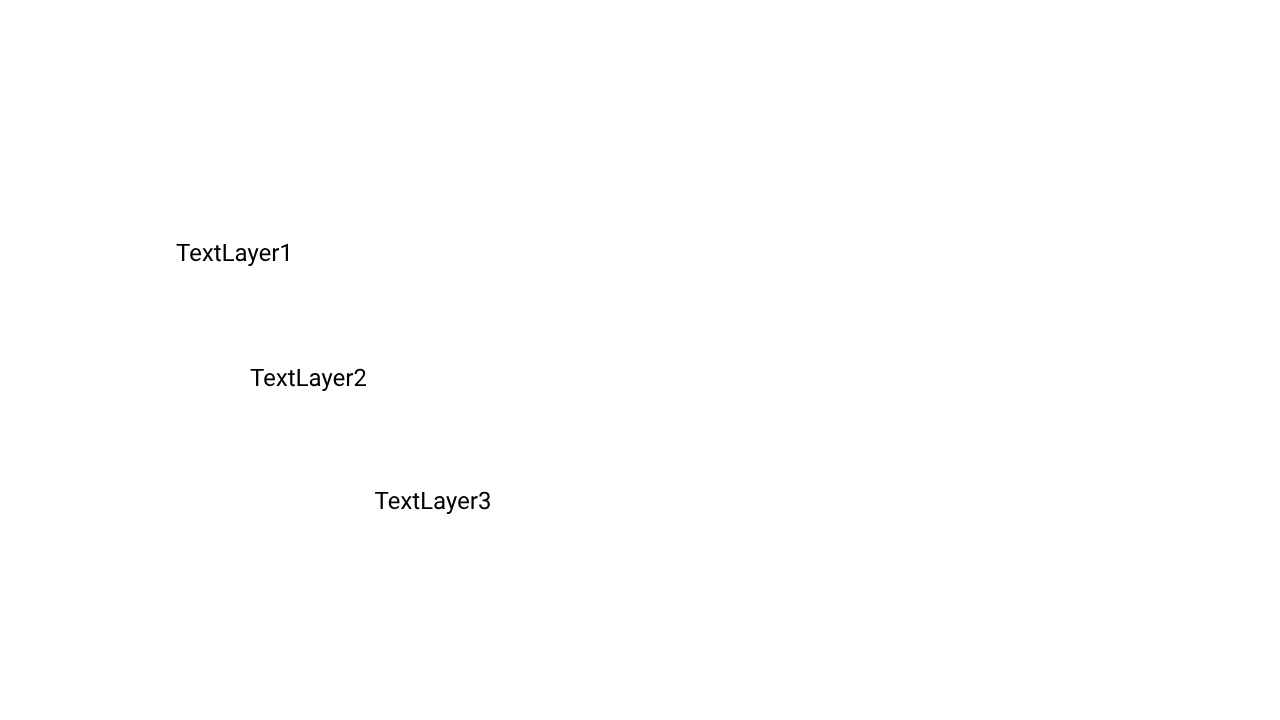
<style>
.page{position:relative;width:1280px;height:720px;background:#ffffff}
.page>*{position:absolute;margin:0}
.t1{font:24px "HelveticaNeue";color:#000000}
</style>
<div class="page">
<p class="t1" style="left:176px;top:243px;width:112px;height:24px">TextLayer1</p>
<p class="t1" style="left:250px;top:368px;width:117px;height:24px">TextLayer2</p>
<p class="t1" style="left:375px;top:491px;width:115px;height:24px">TextLayer3</p>
</div>
